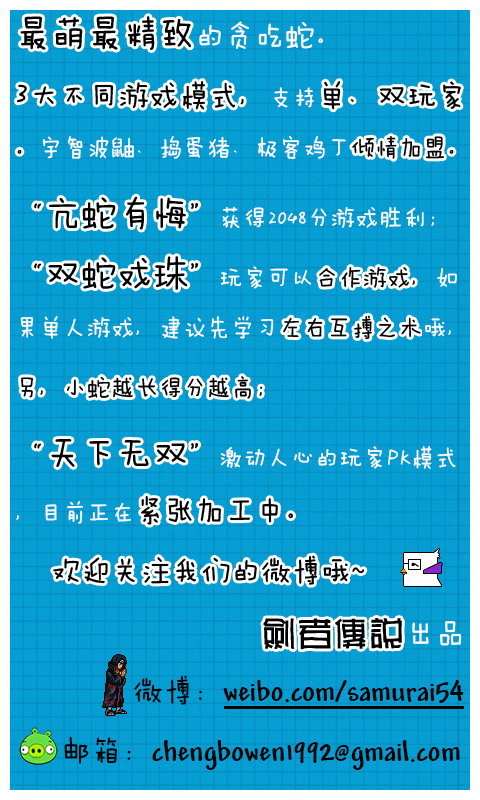
<style>
.page{position:relative;width:480px;height:800px;background:#069dd3}
.page>*{position:absolute;margin:0}
.t1{font:24px/60px "FZMWJW--GB1-0";color:#ffffff}
.t2{font:36px/60px "FZMWJW--GB1-0";color:#ffffff}
.t3{font:30px/60px "FZMWJW--GB1-0";color:#ffffff}
.t4{font:36px/60px "¶®§{¬ü¤u02";color:#ffffff}
.t5{font:30px/60px "FZMWJW--GB1-0";color:#000000}
.t6{font:30px/60px "Andy-Bold";color:#000000}
.t7{font:30px/60px "FZMWJW--GB1-0";color:#010101}
.t8{font:30px/60px "Andy-Bold";color:#010101}
</style>
<div class="page">
<p class="t1" style="left:16px;top:16px;width:448px;height:754px"><span class="t2">最萌最精致</span><span class="t3">的贪吃蛇。<br></span><span class="t2">3</span><span class="t3">大不同游戏模式，</span>支持<span class="t3">单、双玩家</span>。宇智波鼬、捣蛋猪、极客鸡丁倾情加盟。<br><span class="t3">“</span><span class="t2">亢蛇有悔</span><span class="t3">”</span>获得2048分游戏胜利；<span class="t3">“</span><span class="t2">双蛇戏珠</span><span class="t3">”</span>玩家可以合作游戏，如果单人游戏，建议先学习左右互搏之术哦，另，小蛇越长得分越高；<br><span class="t3">“</span><span class="t2">天下无双</span><span class="t3">”</span>激动人心的玩家PK模式，目前正在<span class="t3">紧张加工中。<br> 欢迎关注我们的微博哦~<br>                       </span><span class="t4">劍者傳說</span><span class="t3">出品<br>           </span><span class="t5">微博：</span><span class="t6">weibo.com/samurai54<br>  </span><span class="t7">邮箱：</span><span class="t8">chengbowen1992@gmail.com</span></p>
</div>
